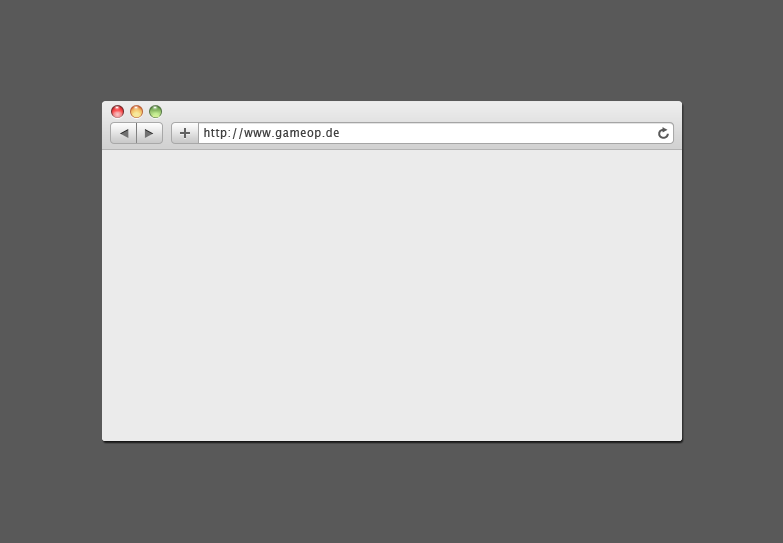
<style>
.page{position:relative;width:783px;height:543px;background:#595959}
.page>*{position:absolute;margin:0}
.t1{font:12.1px "LucidaSans";letter-spacing:0.05em;color:#404040;scale:0.91 1}
</style>
<div class="page">
<p class="t1" style="left:204px;top:128px;width:135px;height:11px">http://www.gameop.de</p>
</div>
